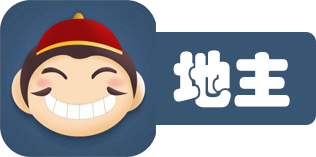
<style>
.page{position:relative;width:316px;height:157px;background:#ffffff}
.page>*{position:absolute;margin:0}
.t1{font:60px "STHupo";color:#ffffff}
</style>
<div class="page">
<p class="t1" style="left:173px;top:50px;width:117px;height:58px">地主</p>
</div>
